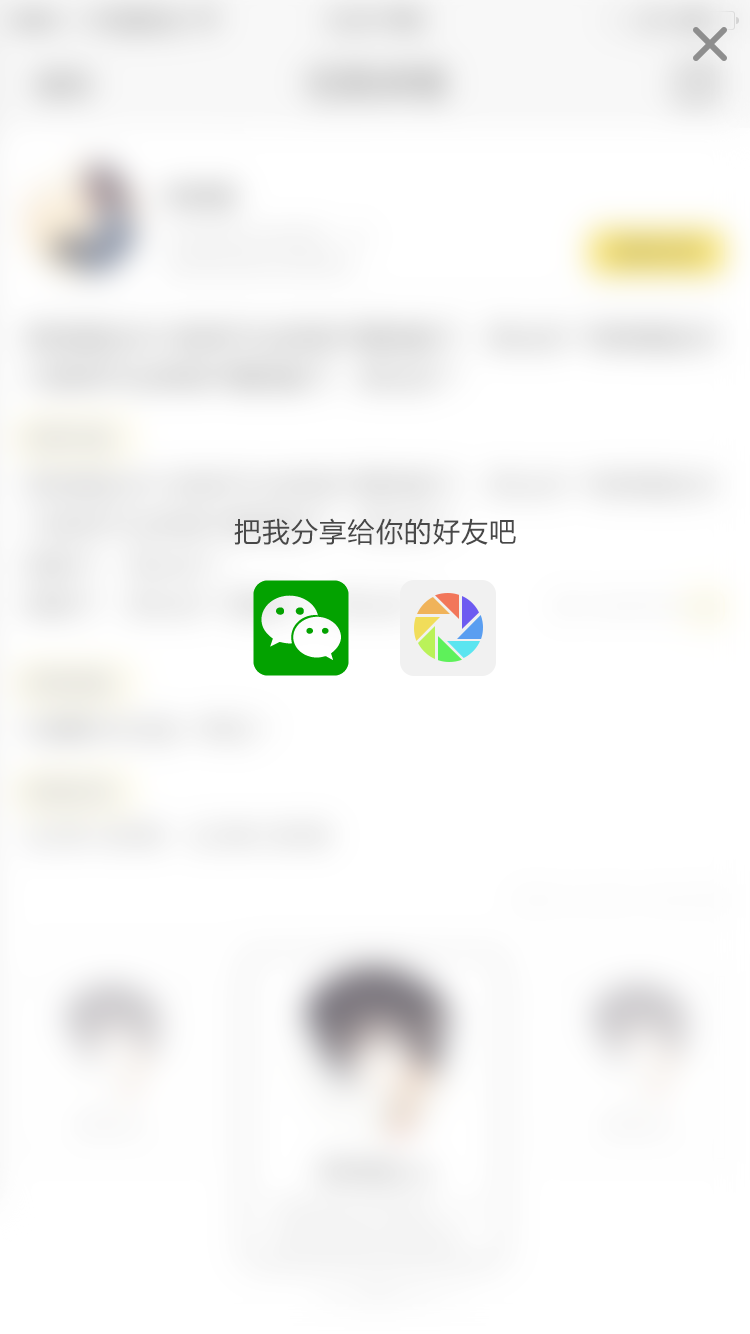
<style>
.page{position:relative;width:750px;height:1334px;background:#ffffff}
.page>*{position:absolute;margin:0}
.t1{font:27px "MicrosoftYaHei";letter-spacing:0.05em;color:#484848}
</style>
<div class="page">
<p class="t1" style="left:234px;top:518px;width:282px;height:27px">把我分享给你的好友吧</p>
</div>
